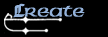
<style>
.page{position:relative;width:108px;height:37px;background:#000000}
.page>*{position:absolute;margin:0}
.t1{font:18px "Celtic-Normal";color:#94b2da}
.t2{font:18px "CathedralExtendedNormal";color:#94b2da}
</style>
<div class="page">
<p class="t1" style="left:13px;top:3px;width:72px;height:15px"><span class="t2">C</span>Reate</p>
</div>
